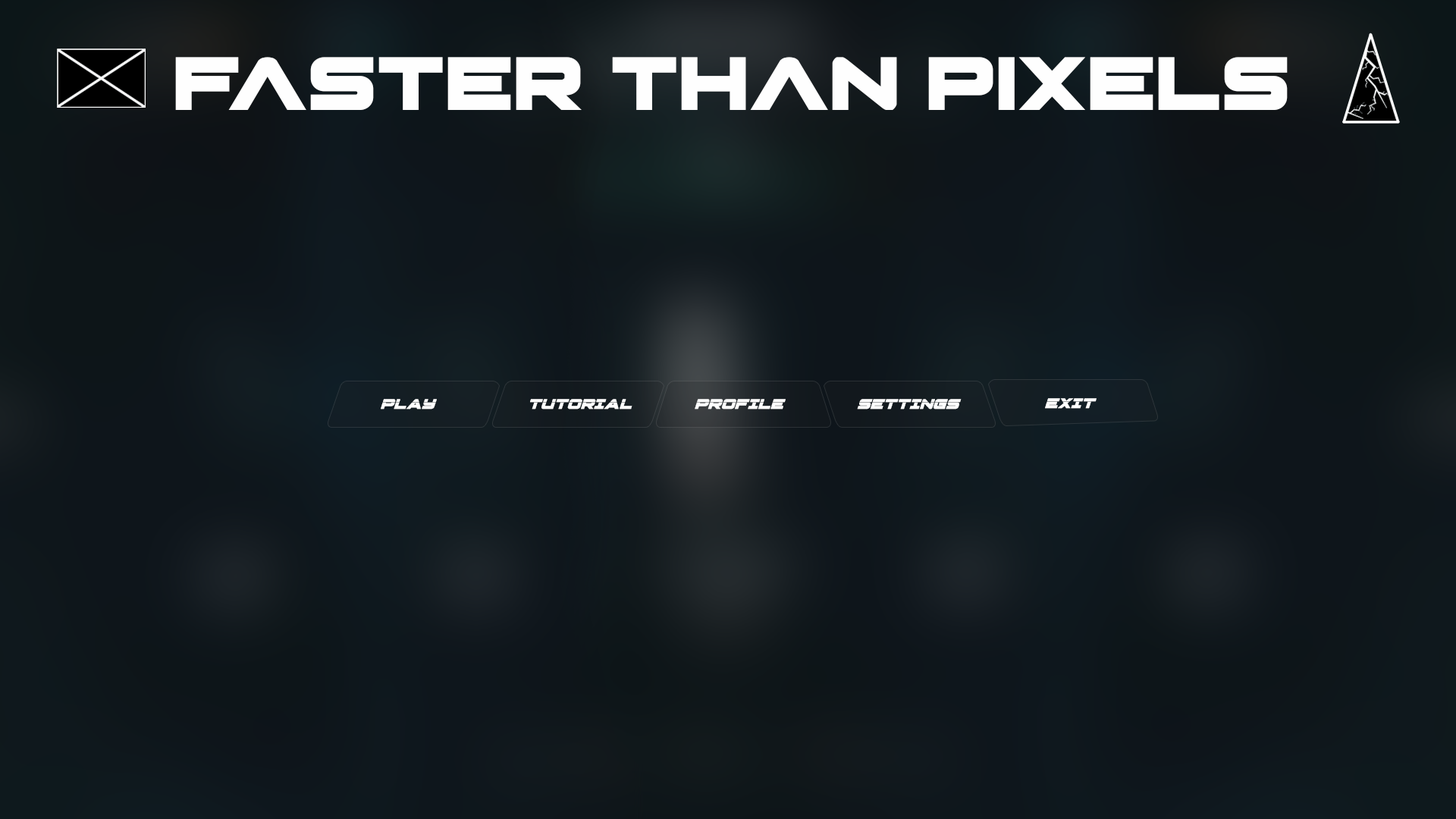
<style>
.page{position:relative;width:1456px;height:819px}
.page>*{position:absolute;margin:0}
.t1{font:80.3px "PilotCommand";color:#fefefe}
.t2{font:14.8px "PilotCommandLaserSuper-Ital";color:#ffffff;text-transform:uppercase;font-weight:bold}
</style>
<div class="page">
<p class="t1" style="left:175px;top:57px;width:1113px;height:53px">Faster than pixels</p>
<p class="t2" style="left:381px;top:399px;width:56px;height:10px">Play</p>
<p class="t2" style="left:530px;top:399px;width:102px;height:10px">tutorial</p>
<p class="t2" style="left:695px;top:399px;width:91px;height:10px">Profile</p>
<p class="t2" style="left:857px;top:399px;width:105px;height:10px">settings</p>
<p class="t2" style="left:1045px;top:398px;width:52px;height:11px">exit</p>
</div>
